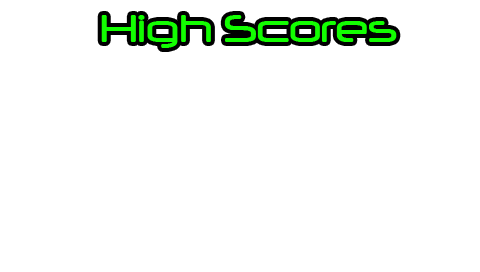
<style>
.page{position:relative;width:480px;height:272px;background:#ffffff}
.page>*{position:absolute;margin:0}
.t1{font:45.5px "Neuropol";color:#12ff00}
</style>
<div class="page">
<p class="t1" style="left:101px;top:15px;width:296px;height:33px">High Scores</p>
</div>
